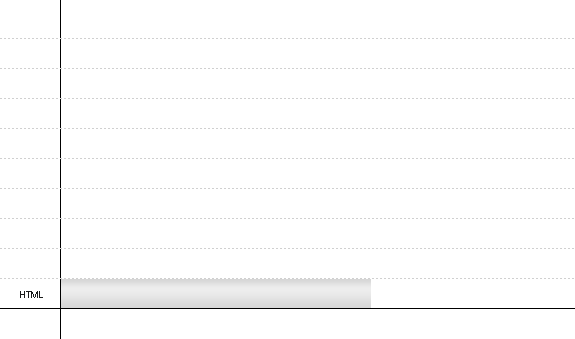
<style>
.page{position:relative;width:575px;height:339px;background:#ffffff}
.page>*{position:absolute;margin:0}
.t1{font:9px "ArialMT";color:#191a1a}
</style>
<div class="page">
<p class="t1" style="left:20px;top:291px;width:23px;height:7px">HTML</p>
</div>
